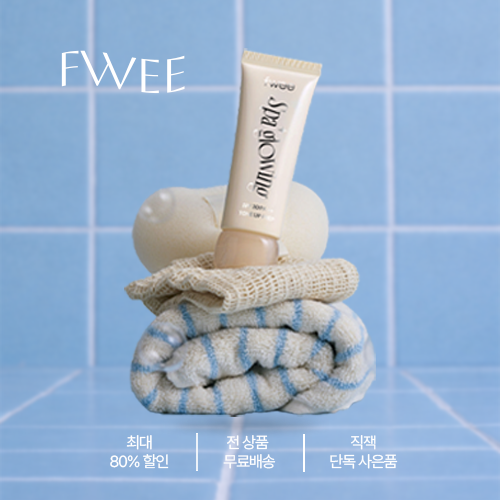
<style>
.page{position:relative;width:500px;height:500px}
.page>*{position:absolute;margin:0}
.t1{font:47.6px "Aboreto-Regular";letter-spacing:-0.06em;color:#ffffff;scale:1.18 1}
.t2{font:16px "Pretendard-Regular";letter-spacing:-0.06em;color:#ffffff}
</style>
<div class="page">
<p class="t1" style="left:61px;top:50px;width:124px;height:44px">FWEE</p>
<p class="t2" style="left:110px;top:435px;width:59px;height:34px;text-align:center">최대<br>80% 할인</p>
<p class="t2" style="left:223px;top:435px;width:53px;height:34px;text-align:center">전 상품 <br>무료배송</p>
<p class="t2" style="left:330px;top:435px;width:68px;height:34px;text-align:center">직잭<br>단독 사은품</p>
</div>
